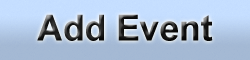
<style>
.page{position:relative;width:250px;height:60px}
.page>*{position:absolute;margin:0}
.t1{font:36px "Arial-BoldMT";letter-spacing:-0.01em}
</style>
<div class="page">
<p class="t1" style="left:37px;top:14px;width:176px;height:27px">Add Event</p>
</div>
